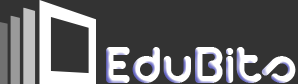
<style>
.page{position:relative;width:298px;height:84px;background:#333333}
.page>*{position:absolute;margin:0}
.t1{font:56.2px "Arista2.0Alternate";color:#ffffff}
</style>
<div class="page">
<p class="t1" style="left:106px;top:47px;width:190px;height:36px">EduBits</p>
</div>
